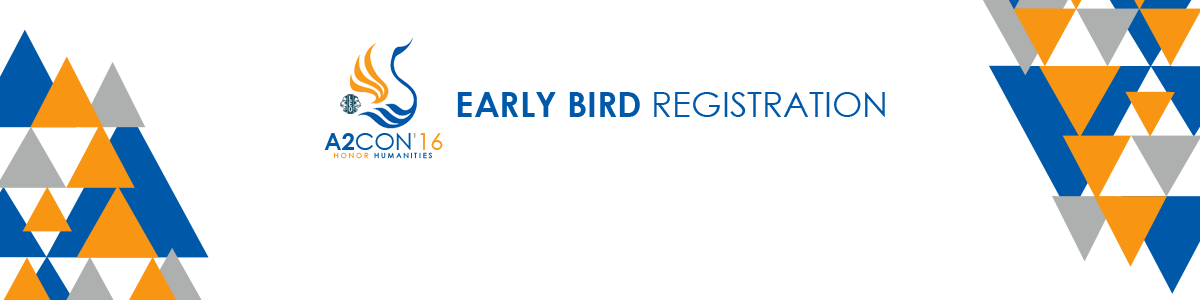
<style>
.page{position:relative;width:1200px;height:300px;background:#ffffff}
.page>*{position:absolute;margin:0}
.t1{font:60px "CenturyGothic";color:#0058a8}
.t2{font:60px "CenturyGothic-Bold";color:#0058a8}
.t3{font:40.7px "CenturyGothic";color:#0058a8}
.t4{font:40.7px "CenturyGothic-Bold";color:#0058a8}
.t5{font:40.7px "CenturyGothic";color:#b2afaf}
.t6{font:40.7px "CenturyGothic";color:#f89a1c}
.t7{font:12.2px "CenturyGothic";color:#0058a8}
.t8{font:12.2px "CenturyGothic";color:#f89a1c}
</style>
<div class="page">
<p class="t1" style="left:457px;top:92px;width:428px;height:25px"><span class="t2">EARLY BIRD </span>REGISTRATION</p>
<p class="t3" style="left:324px;top:133px;width:119px;height:17px"><span class="t4">A2</span>CON<span class="t5">'</span><span class="t6">16</span></p>
<p class="t7" style="left:334px;top:152px;width:98px;height:7px"><span class="t8">H O N O R   </span>H U M A N I T I E S</p>
</div>
